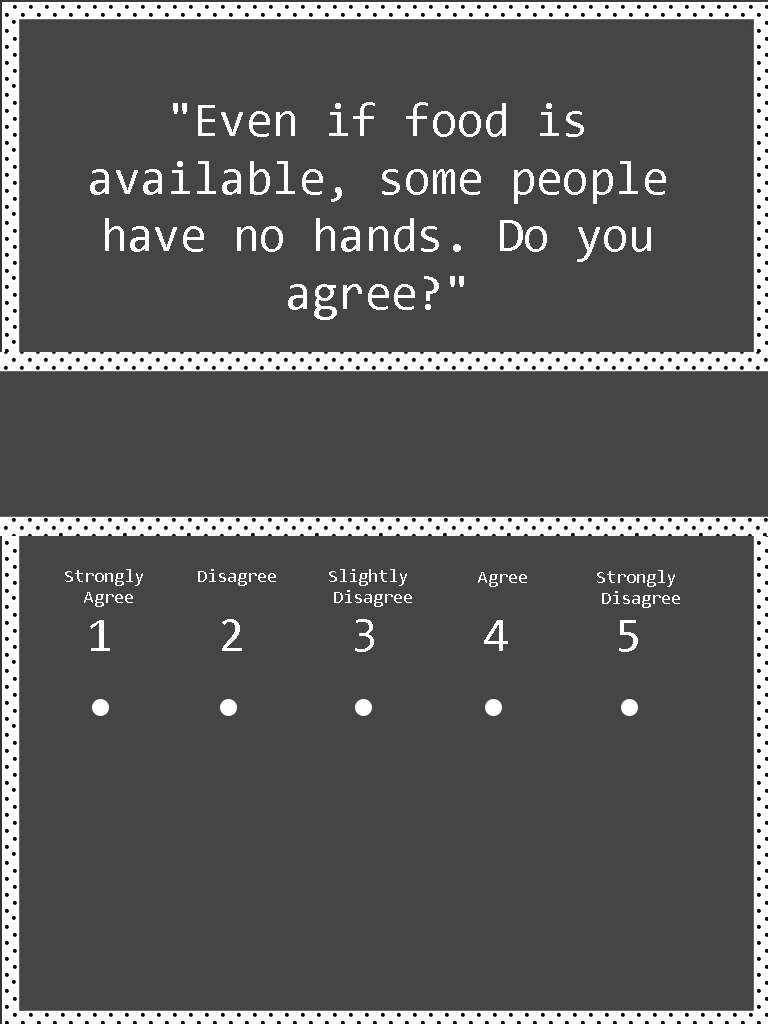
<style>
.page{position:relative;width:768px;height:1024px;background:#454545}
.page>*{position:absolute;margin:0}
.t1{font:48px "Consolas";color:#ffffff}
.t2{font:18px "Consolas";color:#ffffff}
</style>
<div class="page">
<p class="t1" style="left:90px;top:102px;width:576px;height:218px;text-align:center">"Even if food is available, some people have no hands. Do you agree?"</p>
<p class="t2" style="left:65px;top:569px;width:78px;height:38px;text-align:center">Strongly <br>Agree</p>
<p class="t2" style="left:198px;top:569px;width:78px;height:17px">Disagree</p>
<p class="t2" style="left:329px;top:569px;width:83px;height:38px;text-align:center">Slightly <br>Disagree</p>
<p class="t2" style="left:478px;top:572px;width:49px;height:15px">Agree</p>
<p class="t2" style="left:597px;top:570px;width:83px;height:38px;text-align:center">Strongly <br>Disagree</p>
<p class="t1" style="left:90px;top:619px;width:548px;height:33px">1    2    3    4    5</p>
</div>
